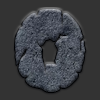
<style>
.page{position:relative;width:100px;height:100px;background:#333333}
.page>*{position:absolute;margin:0}
.t1{font:100px "JFRockSolid";color:#4a505a}
</style>
<div class="page">
<p class="t1" style="left:15px;top:9px;width:71px;height:83px">0</p>
</div>
